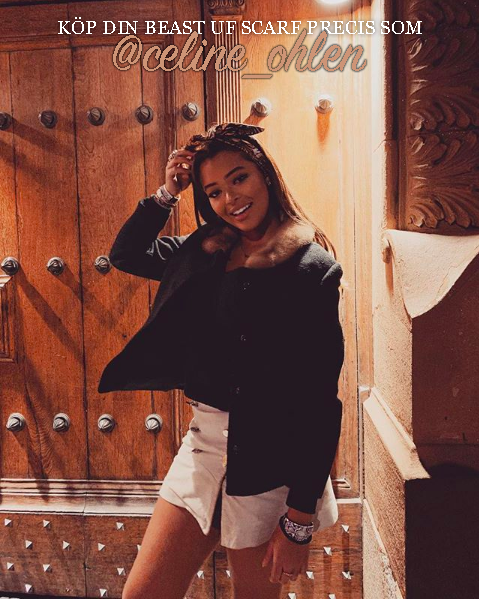
<style>
.page{position:relative;width:479px;height:599px}
.page>*{position:absolute;margin:0}
.t1{font:19.1px "Georgia";color:#ffffff}
</style>
<div class="page">
<p class="t1" style="left:58px;top:17px;width:364px;height:17px">KÖP DIN BEAST UF SCARF PRECIS SOM</p>
</div>
